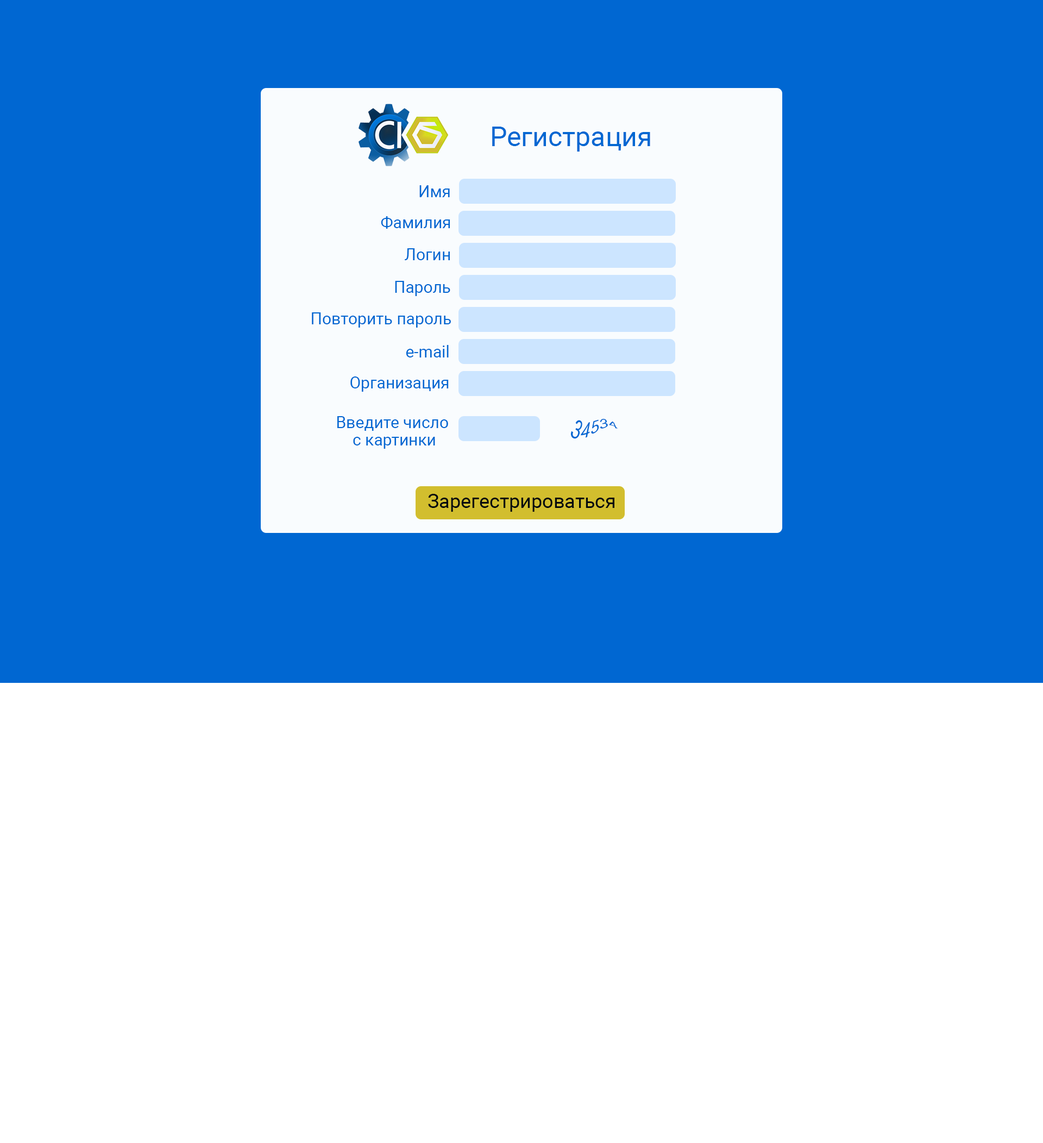
<style>
.page{position:relative;width:1043px;height:1143px;background:#ffffff}
.page>*{position:absolute;margin:0}
.t1{font:27.2px "Roboto-Regular";color:#0067d2}
.t2{font:16.3px "Roboto-Regular";color:#0067d2}
.t3{font:16.3px/17.4px "Roboto-Regular";color:#0067d2}
.t4{font:19.6px "Roboto-Regular";color:#00080e}
</style>
<div class="page">
<p class="t1" style="left:492px;top:127px;width:158px;height:25px">Регистрация</p>
<p class="t2" style="left:419px;top:185px;width:31px;height:12px">Имя</p>
<p class="t2" style="left:381px;top:216px;width:69px;height:13px">Фамилия</p>
<p class="t2" style="left:405px;top:248px;width:45px;height:12px">Логин</p>
<p class="t2" style="left:395px;top:281px;width:55px;height:15px">Пароль</p>
<p class="t2" style="left:312px;top:312px;width:139px;height:16px">Повторить пароль</p>
<p class="t2" style="left:406px;top:345px;width:43px;height:12px">e-mail</p>
<p class="t2" style="left:350px;top:377px;width:99px;height:15px">Организация</p>
<p class="t3" style="left:337px;top:416px;width:111px;height:33px;text-align:center">Введите число <br>с картинки</p>
<p class="t2" style="left:570px;top:419px;width:48px;height:20px">34534</p>
<p class="t4" style="left:428px;top:494px;width:186px;height:18px">Зарегестрироваться</p>
</div>
